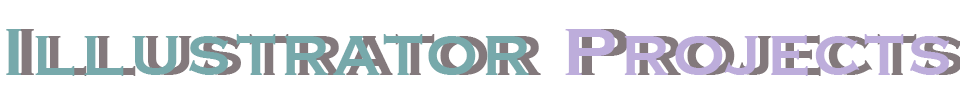
<style>
.page{position:relative;width:960px;height:100px;background:#ffffff}
.page>*{position:absolute;margin:0}
.t1{font:88px "Copperplate";color:#77aaab}
.t2{font:88px "Copperplate";color:#beaddc}
</style>
<div class="page">
<p class="t1" style="left:6px;top:29px;width:944px;height:47px">Illustrator <span class="t2">Projects</span></p>
</div>
